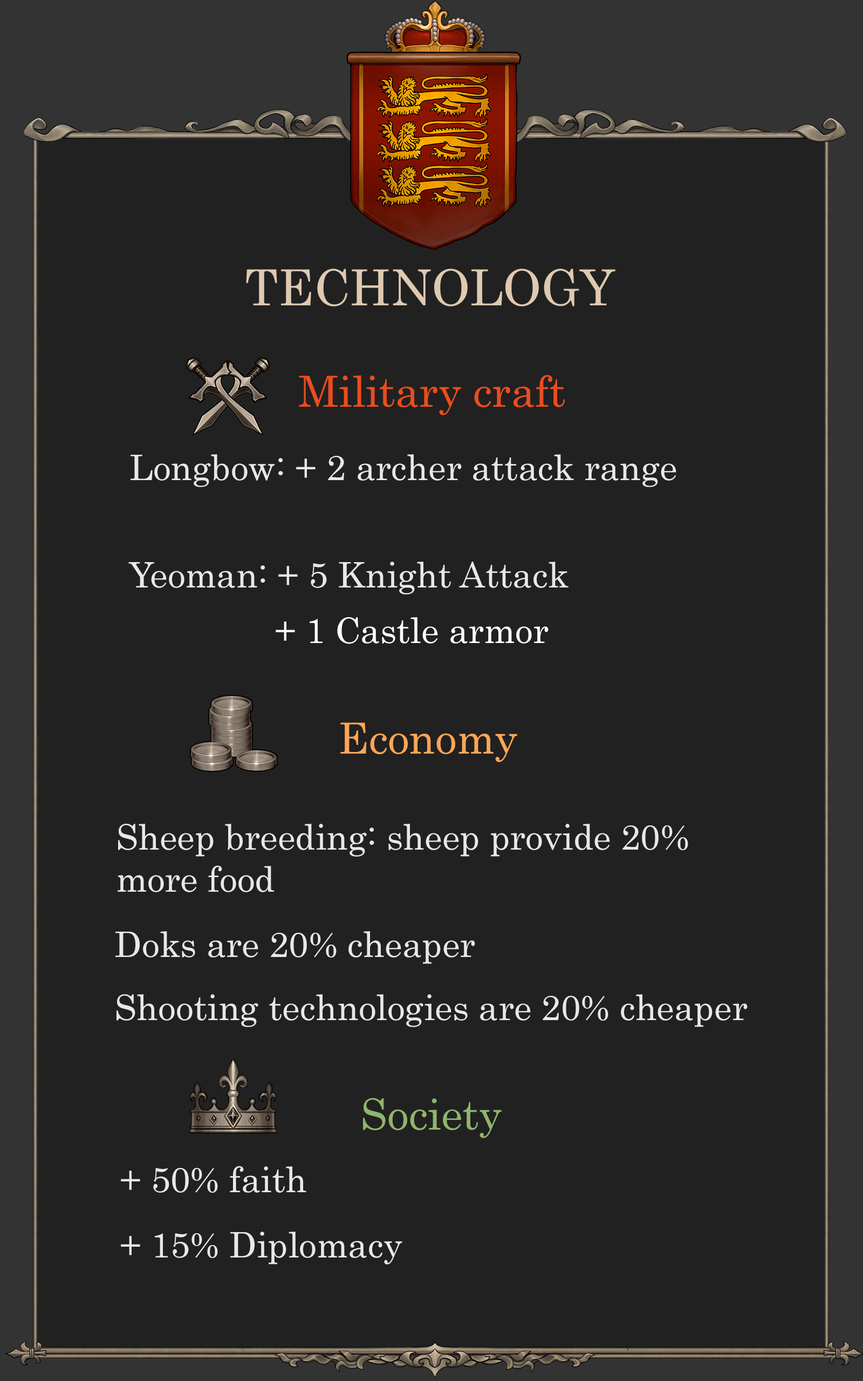
<style>
.page{position:relative;width:863px;height:1381px;background:#212121}
.page>*{position:absolute;margin:0}
.t1{font:49.6px "Century";color:#dfc9b0}
.t2{font:42.8px "Century";color:#ed4c1e}
.t3{font:35.3px "Century";color:#ffffff}
.t4{font:35.3px "Century";color:#dfc9b0}
.t5{font:42.8px "Century";color:#ffa556}
.t6{font:42.8px "Century";color:#8fb56d}
</style>
<div class="page">
<p class="t1" style="left:246px;top:269px;width:370px;height:37px">TECHNOLOGY</p>
<p class="t2" style="left:299px;top:375px;width:266px;height:40px">Military craft</p>
<p class="t3" style="left:131px;top:454px;width:546px;height:33px;opacity:0.88"><span class="t4"> </span>Longbow: + 2 archer attack range</p>
<p class="t3" style="left:128px;top:562px;width:441px;height:33px;opacity:0.88">Yeoman: + 5 Knight Attack</p>
<p class="t3" style="left:276px;top:617px;width:273px;height:27px">+ 1 Castle armor</p>
<p class="t5" style="left:340px;top:722px;width:177px;height:40px">Economy</p>
<p class="t3" style="left:118px;top:824px;width:570px;height:68px;opacity:0.88">Sheep breeding: sheep provide 20% <br>more food</p>
<p class="t3" style="left:115px;top:931px;width:360px;height:33px;opacity:0.88">Doks are 20% cheaper</p>
<p class="t3" style="left:117px;top:994px;width:631px;height:33px;opacity:0.88">Shooting technologies are 20% cheaper</p>
<p class="t6" style="left:363px;top:1098px;width:139px;height:40px">Society</p>
<p class="t3" style="left:121px;top:1166px;width:185px;height:27px;opacity:0.88">+ 50% faith</p>
<p class="t3" style="left:121px;top:1232px;width:282px;height:33px;opacity:0.88">+ 15% Diplomacy</p>
</div>
